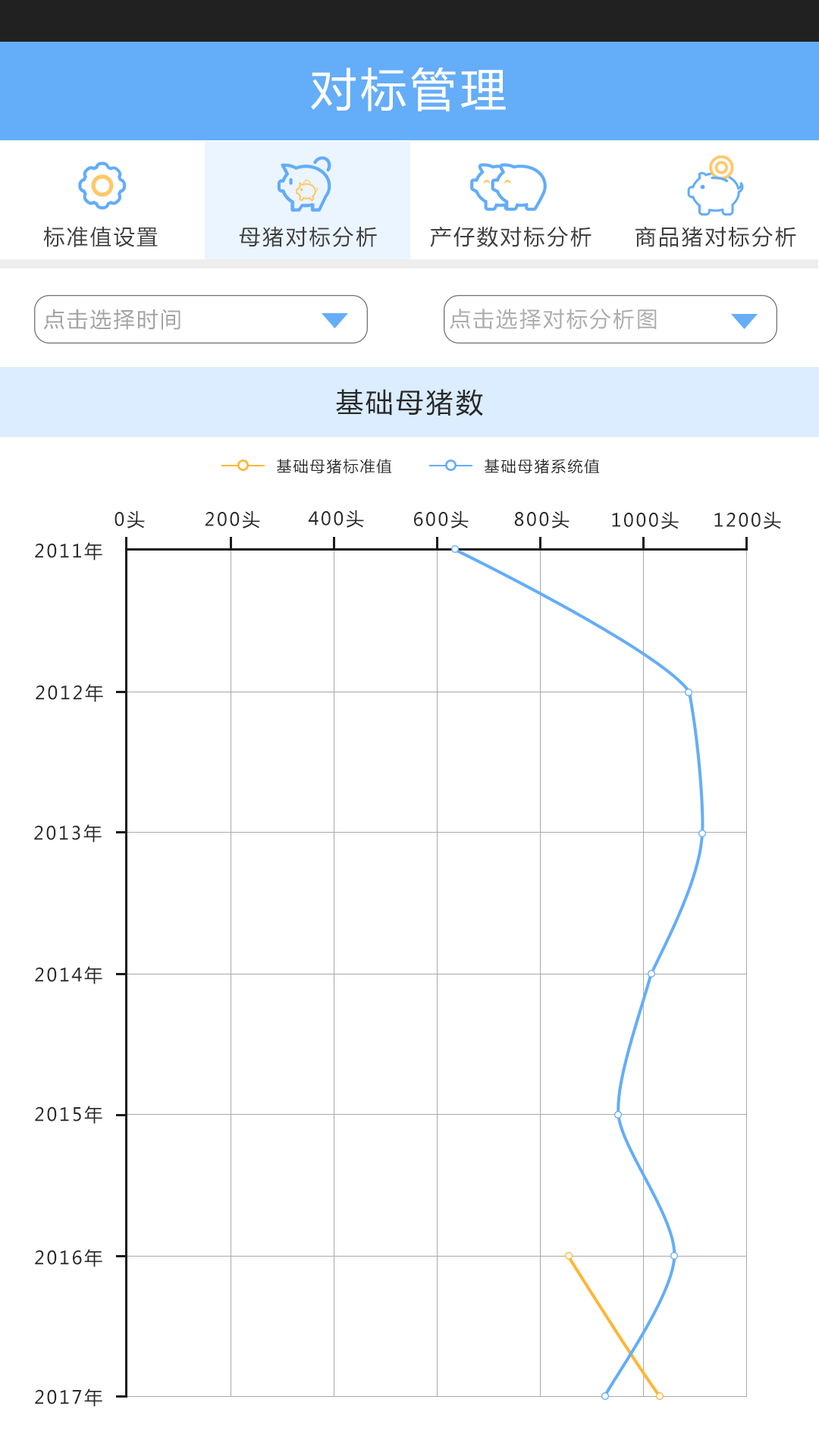
<style>
.page{position:relative;width:819px;height:1456px;background:#ffffff}
.page>*{position:absolute;margin:0}
.t1{font:45.5px "MicrosoftYaHei";letter-spacing:0.1em;color:#fefefe}
.t2{font:21.2px "MicrosoftYaHei";letter-spacing:0.1em;color:#3f3e3e}
.t3{font:21.2px "MicrosoftYaHei";letter-spacing:0.1em;color:#a4a4a4}
.t4{font:21.2px "MicrosoftYaHei";letter-spacing:0.1em;color:#acacac}
.t5{font:27.3px "MicrosoftYaHei";letter-spacing:0.1em;color:#292929}
.t6{font:15.2px "MicrosoftYaHei";letter-spacing:0.1em;color:#292929}
.t7{font:18.2px "MicrosoftYaHei";letter-spacing:0.1em;color:#292929}
</style>
<div class="page">
<p class="t1" style="left:311px;top:67px;width:195px;height:44px">对标管理</p>
<p class="t2" style="left:43px;top:226px;width:115px;height:21px">标准值设置</p>
<p class="t2" style="left:239px;top:226px;width:138px;height:21px">母猪对标分析</p>
<p class="t2" style="left:430px;top:226px;width:161px;height:21px">产仔数对标分析</p>
<p class="t2" style="left:635px;top:226px;width:161px;height:21px">商品猪对标分析</p>
<p class="t3" style="left:43px;top:309px;width:137px;height:21px">点击选择时间</p>
<p class="t4" style="left:450px;top:309px;width:207px;height:21px">点击选择对标分析图</p>
<p class="t5" style="left:336px;top:389px;width:147px;height:27px">基础母猪数</p>
<p class="t6" style="left:277px;top:459px;width:115px;height:15px">基础母猪标准值</p>
<p class="t6" style="left:485px;top:459px;width:115px;height:15px">基础母猪系统值</p>
<p class="t7" style="left:308px;top:510px;width:56px;height:18px">400头</p>
<p class="t7" style="left:115px;top:510px;width:30px;height:19px">0头</p>
<p class="t7" style="left:205px;top:510px;width:55px;height:19px">200头</p>
<p class="t7" style="left:414px;top:510px;width:55px;height:19px">600头</p>
<p class="t7" style="left:514px;top:510px;width:56px;height:19px">800头</p>
<p class="t7" style="left:612px;top:511px;width:67px;height:18px">1000头</p>
<p class="t7" style="left:714px;top:511px;width:67px;height:18px">1200头</p>
<p class="t7" style="left:35px;top:542px;width:67px;height:18px">2011年</p>
<p class="t7" style="left:36px;top:684px;width:67px;height:18px">2012年</p>
<p class="t7" style="left:34px;top:824px;width:68px;height:18px">2013年</p>
<p class="t7" style="left:35px;top:966px;width:67px;height:18px">2014年</p>
<p class="t7" style="left:35px;top:1106px;width:67px;height:18px">2015年</p>
<p class="t7" style="left:35px;top:1249px;width:67px;height:18px">2016年</p>
<p class="t7" style="left:35px;top:1388px;width:67px;height:19px">2017年</p>
</div>
